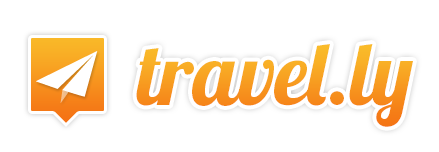
<style>
.page{position:relative;width:439px;height:152px;background:#ffffff}
.page>*{position:absolute;margin:0}
.t1{font:87.1px "Lobster1.4";color:#f7981f}
</style>
<div class="page">
<p class="t1" style="left:136px;top:44px;width:277px;height:83px">travel.ly</p>
</div>
